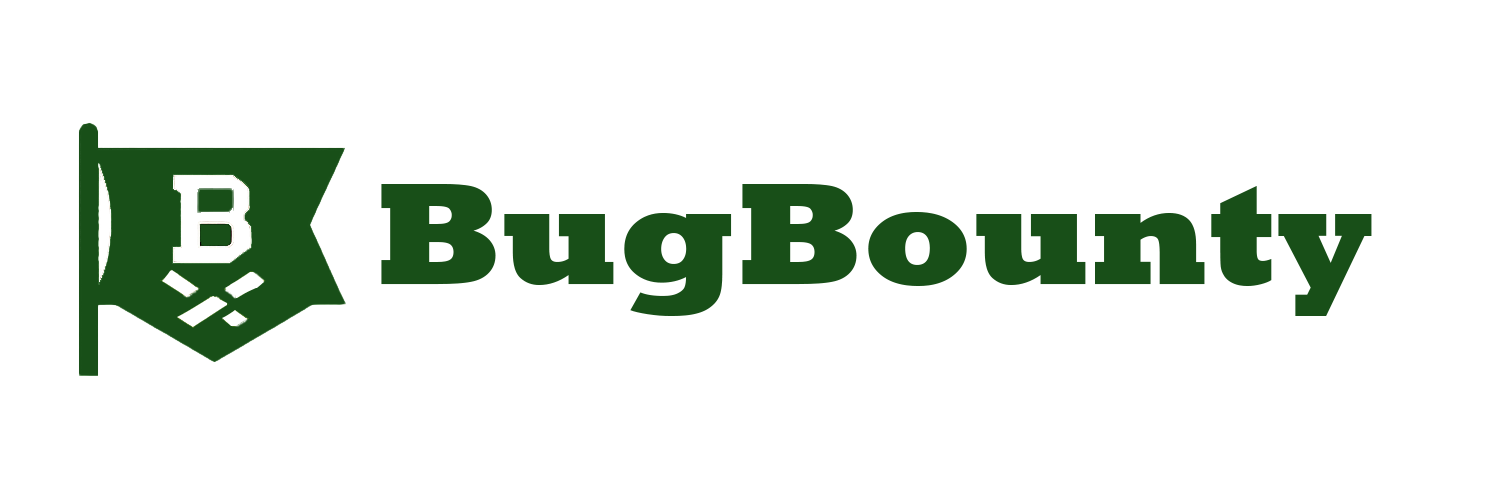
<style>
.page{position:relative;width:1500px;height:500px;background:#ffffff}
.page>*{position:absolute;margin:0}
.t1{font:148px "Rockwell-ExtraBold";color:#184f18}
</style>
<div class="page">
<p class="t1" style="left:381px;top:184px;width:991px;height:132px">BugBounty</p>
</div>
